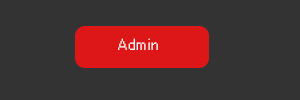
<style>
.page{position:relative;width:300px;height:100px;background:#333333}
.page>*{position:absolute;margin:0}
.t1{font:14px "MS Sans Serif";color:#ffffff}
.t2{font:14px "Verdana-Bold";color:#ffffff}
</style>
<div class="page">
<p class="t1" style="left:118px;top:38px;width:40px;height:12px"><span class="t2"> </span>Admin</p>
</div>
